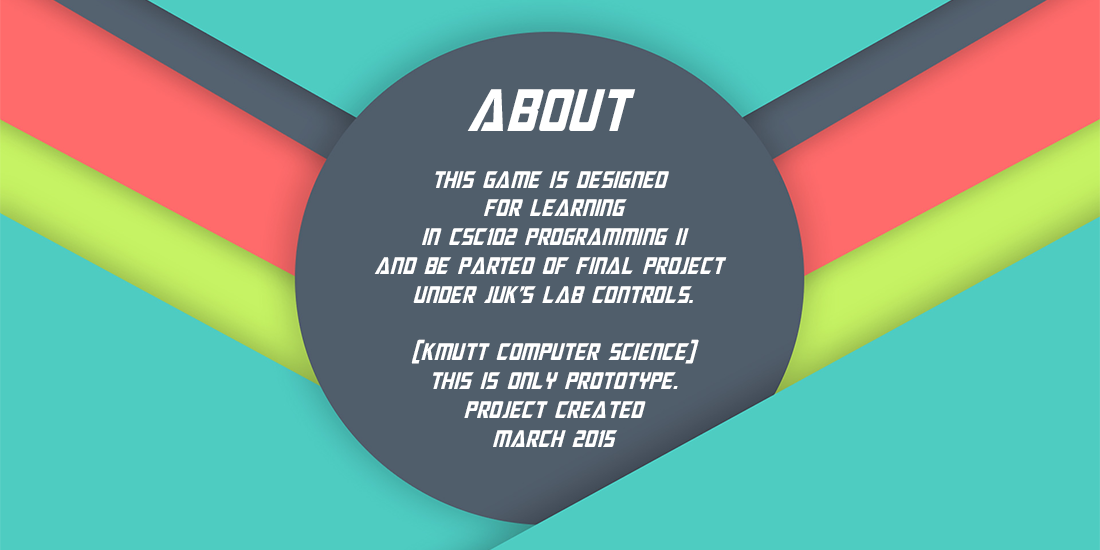
<style>
.page{position:relative;width:1100px;height:550px;background:#4eccc1}
.page>*{position:absolute;margin:0}
.t1{font:60px "MegatronCondensed-Italic";color:#ffffff}
.t2{font:24px "MegatronCondensed-Italic";color:#ffffff}
</style>
<div class="page">
<p class="t1" style="left:467px;top:89px;width:169px;height:42px">ABOUt</p>
<p class="t2" style="left:374px;top:171px;width:353px;height:276px;text-align:center">this game is designed <br>for learning<br>in csc102 programming ii<br>and be parted of final project <br>under juk’s lab controls.<br><br>(kmutt computer science)<br>this is only prototype.<br>project created<br>march 2015</p>
</div>
